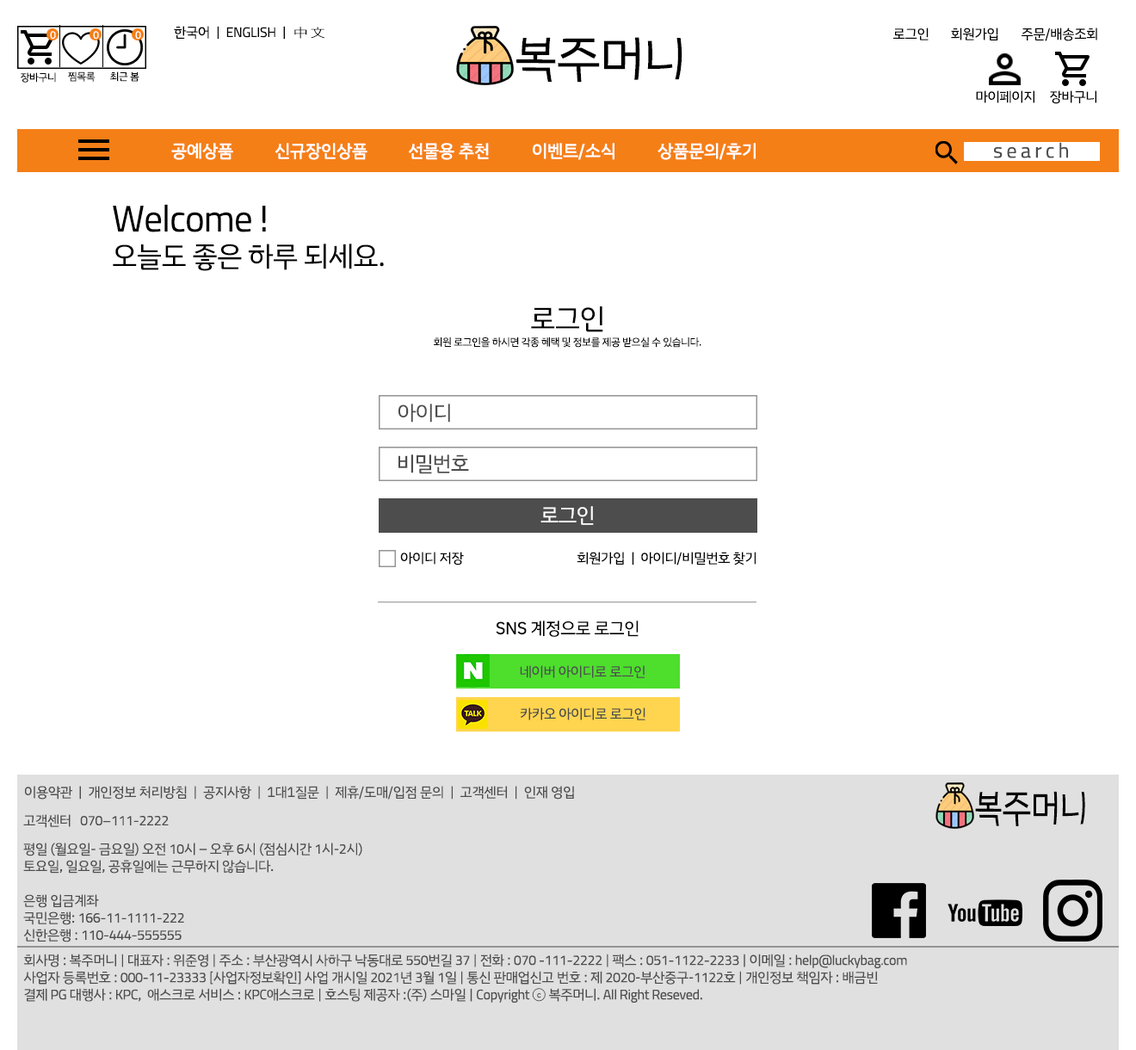
<style>
.page{position:relative;width:1136px;height:1050px;background:#ffffff}
.page>*{position:absolute;margin:0}
.t1{font:13.8px "TitilliumWeb-Regular";letter-spacing:-0.02em;color:#000000}
.t2{font:13.8px "IBMPlexSansKR";letter-spacing:-0.02em;color:#000000}
.t3{font:13.8px "Terminal";letter-spacing:-0.02em;color:#000000}
.t4{font:10.3px "IBMPlexSansKR";letter-spacing:-0.02em;color:#ffffff}
.t5{font:37px "IBMPlexSansKR";letter-spacing:-0.02em;color:#000000}
.t6{font:40.4px "IBMPlexSansKR";letter-spacing:-0.02em;color:#000000}
.t7{font:10.3px "IBMPlexSansKR";letter-spacing:-0.02em;color:#000000}
.t8{font:17.2px "IBMPlexSansKR";letter-spacing:-0.02em;color:#ffffff;font-weight:bold}
.t9{font:20.7px "TitilliumWeb-Regular";letter-spacing:-0.02em;color:#4d4d4d}
.t10{font:28.4px/17.2px "IBMPlexSansKR";letter-spacing:-0.02em;color:#000000}
.t11{font:37px/17.2px "TitilliumWeb-Regular";letter-spacing:-0.02em;color:#000000}
.t12{font:10.3px/17.2px "IBMPlexSansKR";letter-spacing:-0.02em;color:#000000}
.t13{font:20.7px "IBMPlexSansKR";letter-spacing:-0.02em;color:#4d4d4d}
.t14{font:20.7px "IBMPlexSansKR";letter-spacing:-0.02em;color:#ffffff}
.t15{font:17.2px "IBMPlexSansKR";letter-spacing:-0.02em;color:#000000}
.t16{font:13.8px "IBMPlexSansKR";letter-spacing:-0.02em;color:#4d4d4d}
.t17{font:28.7px "IBMPlexSansKR";letter-spacing:-0.02em;color:#000000;scale:0.85 1}
.t18{font:31.4px "IBMPlexSansKR";letter-spacing:-0.02em;color:#000000;scale:0.85 1}
.t19{font:13.8px "TitilliumWeb-Regular";letter-spacing:-0.02em;color:#4d4d4d}
.t20{font:13.8px/17.2px "IBMPlexSansKR";letter-spacing:-0.02em;color:#4d4d4d}
.t21{font:13.8px/17.2px "TitilliumWeb-Regular";letter-spacing:-0.02em;color:#4d4d4d}
</style>
<div class="page">
<p class="t1" style="left:174px;top:26px;width:151px;height:14px"><span class="t2">한국어  |  </span>ENGLISH<span class="t2">  |  </span><span class="t3">中文</span></p>
<p class="t2" style="left:893px;top:28px;width:35px;height:12px">로그인</p>
<p class="t2" style="left:951px;top:28px;width:47px;height:12px">회원가입</p>
<p class="t2" style="left:1021px;top:28px;width:76px;height:13px">주문/배송조회</p>
<p class="t4" style="left:50px;top:31px;width:6px;height:9px">0</p>
<p class="t4" style="left:93px;top:31px;width:6px;height:9px">0</p>
<p class="t4" style="left:135px;top:31px;width:6px;height:9px">0</p>
<p class="t5" style="left:516px;top:37px;width:166px;height:46px"><span class="t6">            <br>            <br>             </span>복주머니</p>
<p class="t7" style="left:21px;top:72px;width:35px;height:11px">장바구니</p>
<p class="t7" style="left:68px;top:71px;width:28px;height:11px">찜목록</p>
<p class="t7" style="left:110px;top:71px;width:29px;height:11px">최근 봄</p>
<p class="t2" style="left:976px;top:90px;width:58px;height:13px">마이페이지</p>
<p class="t2" style="left:1050px;top:90px;width:46px;height:14px">장바구니</p>
<p class="t8" style="left:171px;top:143px;width:62px;height:17px">공예상품</p>
<p class="t8" style="left:275px;top:143px;width:92px;height:17px">신규장인상품</p>
<p class="t8" style="left:409px;top:143px;width:80px;height:17px">선물용 추천</p>
<p class="t8" style="left:533px;top:143px;width:81px;height:17px">이벤트/소식</p>
<p class="t8" style="left:657px;top:143px;width:99px;height:17px">상품문의/후기</p>
<p class="t9" style="left:994px;top:142px;width:74px;height:16px">s e a r c h</p>
<p class="t10" style="left:113px;top:204px;width:271px;height:67px"><span class="t11">Welcome !<br><br></span>오늘도 좋은 하루 되세요.</p>
<p class="t12" style="left:434px;top:306px;width:267px;height:42px;text-align:center"><span class="t10">로그인<br></span>회원 로그인을 하시면 각종 혜택 및 정보를 제공 받으실 수 있습니다.</p>
<p class="t13" style="left:398px;top:404px;width:52px;height:19px">아이디</p>
<p class="t13" style="left:398px;top:454px;width:71px;height:20px">비밀번호</p>
<p class="t14" style="left:540px;top:506px;width:54px;height:19px">로그인</p>
<p class="t2" style="left:400px;top:552px;width:64px;height:13px">아이디 저장</p>
<p class="t2" style="left:577px;top:552px;width:179px;height:13px">회원가입  |  아이디/비밀번호 찾기</p>
<p class="t15" style="left:496px;top:620px;width:142px;height:17px">SNS 계정으로 로그인</p>
<p class="t16" style="left:520px;top:665px;width:125px;height:13px">네이버 아이디로 로그인</p>
<p class="t16" style="left:521px;top:707px;width:124px;height:13px">카카오 아이디로 로그인</p>
<p class="t16" style="left:25px;top:786px;width:549px;height:13px">이용약관  |  개인정보 처리방침  |  공지사항  |  1대1질문  |  제휴/도매/입점 문의  |  고객센터  |  인재 영입</p>
<p class="t17" style="left:975px;top:791px;width:110px;height:35px"><span class="t18">            <br>            <br>             </span>복주머니</p>
<p class="t19" style="left:23px;top:814px;width:146px;height:14px"><span class="t16">고객센터   </span>070–111-2222</p>
<p class="t20" style="left:23px;top:842px;width:339px;height:100px">평일 (월요일- 금요일) 오전 <span class="t21">10</span>시 – 오후<span class="t21"> 6</span>시 (점심시간 <span class="t21">1</span>시-<span class="t21">2</span>시)<br>토요일, 일요일, 공휴일에는 근무하지 않습니다.<br><br>은행 입금계좌<br>국민은행: <span class="t21">166-11-1111-222<br></span>신한은행 : <span class="t21">110-444-555555</span></p>
<p class="t20" style="left:23px;top:953px;width:884px;height:49px">회사명 : 복주머니 | 대표자 : 위준영 | 주소 : 부산광역시 사하구 낙동대로 <span class="t21">550</span>번길 <span class="t21">37</span> | 전화 : <span class="t21">070 -111-2222</span> | 팩스 : <span class="t21">051-1122-2233</span> | 이메일 : <span class="t21">help@luckybag.com<br></span>사업자 등록번호 : <span class="t21">000-11-23333</span> [사업자정보확인] 사업 개시일 <span class="t21">2021</span>년 <span class="t21">3</span>월<span class="t21"> 1</span>일 | 통신 판매업신고 번호 : 제 <span class="t21">2020</span>-부산중구-<span class="t21">1122</span>호 | 개인정보 책임자 : 배금빈<br>결제<span class="t21"> PG</span> 대행사 : <span class="t21">KPC</span>,  애스크로 서비스 : <span class="t21">KPC</span>애스크로 | 호스팅 제공자 :(주) 스마일 | <span class="t21">Copyright </span>ⓒ 복주머니. <span class="t21">All Right Reseved</span>.</p>
</div>
